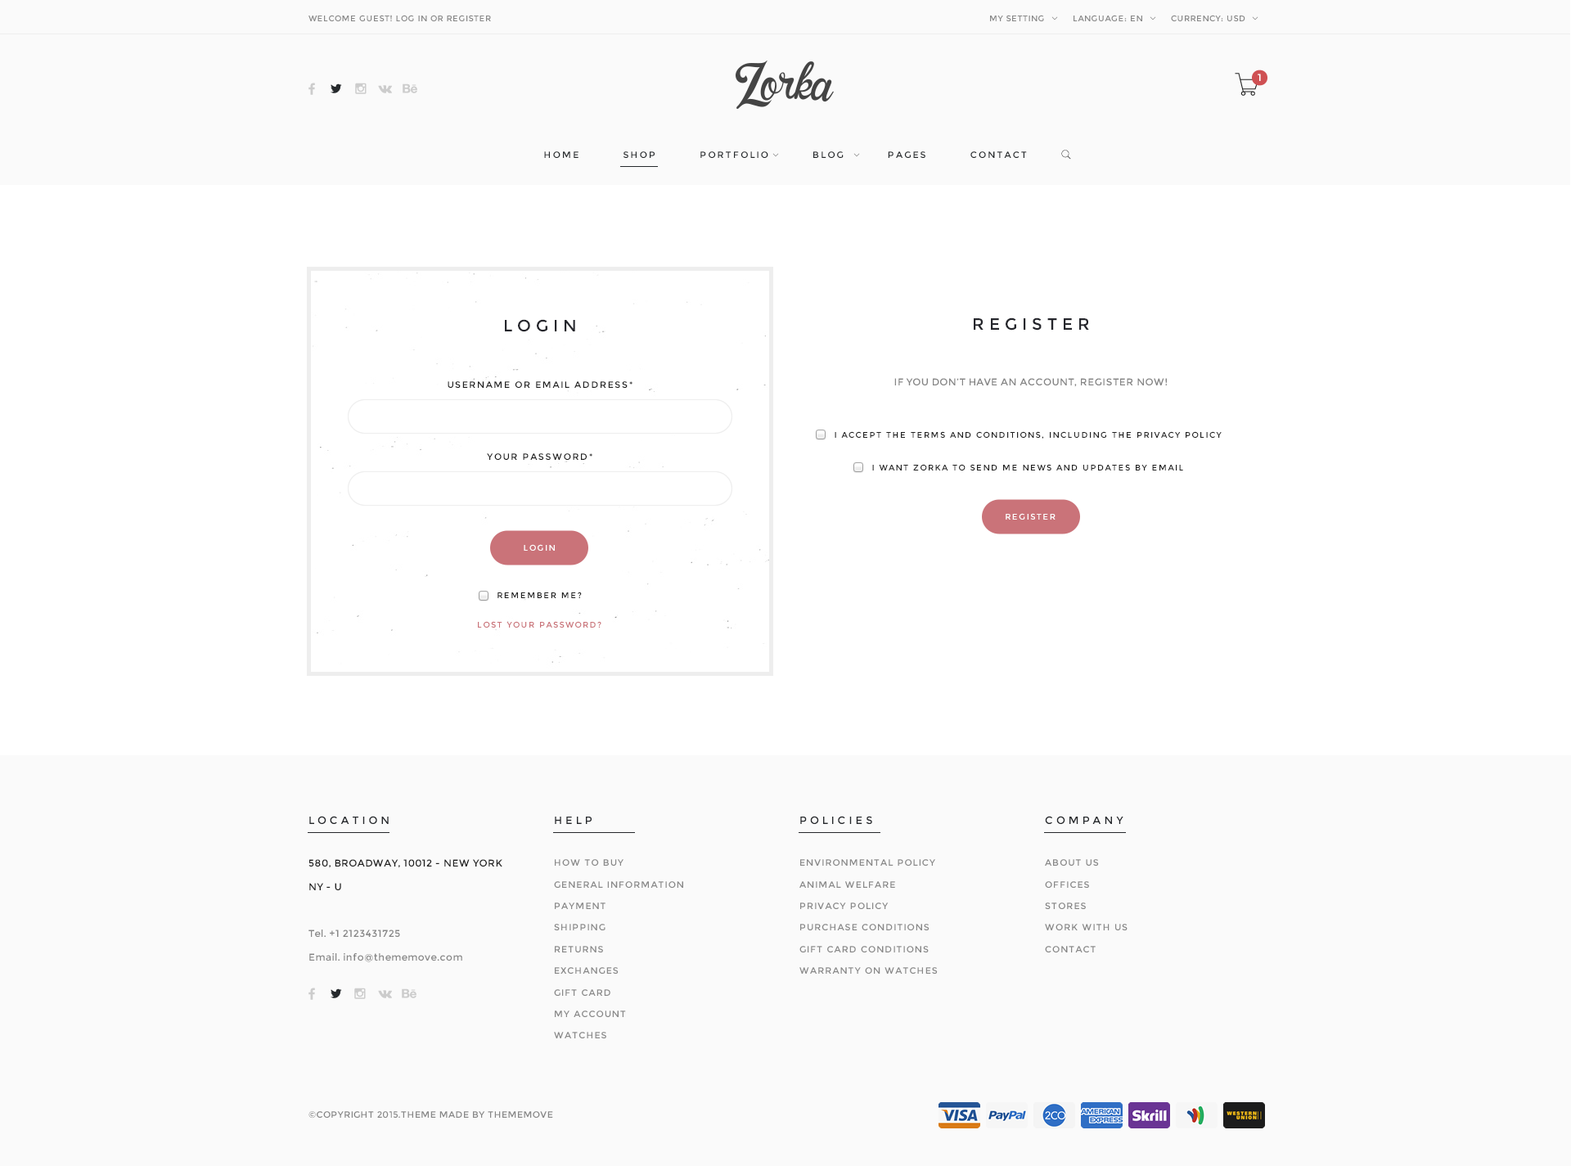
<style>
.page{position:relative;width:1571px;height:1166px;background:#fafafa}
.page>*{position:absolute;margin:0}
.t1{font:8.2px "Montserrat-Regular";letter-spacing:0.05em;color:#888888}
.t2{font:9.8px "Montserrat-Regular";letter-spacing:0.3em;color:#ffffff}
.t3{font:9px "Montserrat-Regular";letter-spacing:0.2em;color:#25292c}
.t4{font:16.4px "Montserrat-Regular";letter-spacing:0.3em;color:#25262c}
.t5{font:9px "Montserrat-Regular";letter-spacing:0.15em;color:#202020}
.t6{font:9.8px "Montserrat-Regular";letter-spacing:0.04em;color:#858585}
.t7{font:8.2px "Montserrat-Regular";letter-spacing:0.15em;color:#212121}
.t8{font:9px "Montserrat-Regular";letter-spacing:0.15em;color:#1f1f1f}
.t9{font:8.2px "Montserrat-Regular";letter-spacing:0.15em;color:#ffffff}
.t10{font:8.2px "Montserrat-Regular";letter-spacing:0.15em;color:#222222}
.t11{font:8.2px "Montserrat-Regular";letter-spacing:0.15em;color:#ca7379}
.t12{font:10.6px "Montserrat-Regular";letter-spacing:0.3em;color:#25282c}
.t13{font:9.8px/23.6px "Montserrat-Regular";letter-spacing:0.04em;color:#868686}
.t14{font:9.8px/23.6px "Montserrat-Regular";letter-spacing:0.04em;color:#202020}
.t15{font:9px/21.6px "Montserrat-Regular";letter-spacing:0.1em;color:#888888}
.t16{font:9px/21.6px "Montserrat-Regular";letter-spacing:0.1em;color:#878787}
.t17{font:9px "Montserrat-Regular";letter-spacing:0.04em;color:#868686}
</style>
<div class="page">
<p class="t1" style="left:308px;top:15px;width:183px;height:6px">WELCOME GUEST! LOG IN OR REGISTER</p>
<p class="t1" style="left:990px;top:15px;width:54px;height:6px">MY SETTING</p>
<p class="t1" style="left:1073px;top:15px;width:69px;height:6px">LANGUAGE: EN</p>
<p class="t1" style="left:1171px;top:15px;width:74px;height:6px">CURRENCY: USD</p>
<p class="t2" style="left:1258px;top:74px;width:3px;height:7px">1</p>
<p class="t3" style="left:544px;top:151px;width:483px;height:7px">HOME          SHOP          PORTFOLIO          BLOG          PAGES          CONTACT</p>
<p class="t4" style="left:974px;top:317px;width:115px;height:14px">REGISTER</p>
<p class="t4" style="left:505px;top:319px;width:70px;height:13px">LOGIN</p>
<p class="t5" style="left:448px;top:381px;width:184px;height:7px">USERNAME OR EMAIL ADDRESS*</p>
<p class="t6" style="left:894px;top:378px;width:274px;height:9px">IF YOU DON’T HAVE AN ACCOUNT, REGISTER NOW!</p>
<p class="t7" style="left:835px;top:431px;width:387px;height:8px">I ACCEPT THE TERMS AND CONDITIONS, INCLUDING THE PRIVACY POLICY</p>
<p class="t8" style="left:487px;top:453px;width:105px;height:7px">YOUR PASSWORD*</p>
<p class="t7" style="left:872px;top:464px;width:311px;height:6px">I WANT ZORKA TO SEND ME NEWS AND UPDATES BY EMAIL</p>
<p class="t9" style="left:1006px;top:513px;width:49px;height:7px">REGISTER</p>
<p class="t9" style="left:524px;top:544px;width:31px;height:7px">LOGIN</p>
<p class="t10" style="left:497px;top:592px;width:85px;height:6px">REMEMBER ME?</p>
<p class="t11" style="left:478px;top:621px;width:123px;height:7px">LOST YOUR PASSWORD?</p>
<p class="t12" style="left:309px;top:816px;width:80px;height:8px">LOCATION</p>
<p class="t12" style="left:555px;top:817px;width:37px;height:7px">HELP</p>
<p class="t12" style="left:800px;top:816px;width:72px;height:8px">POLICIES</p>
<p class="t12" style="left:1045px;top:816px;width:78px;height:8px">COMPANY</p>
<p class="t13" style="left:308px;top:859px;width:194px;height:103px"><span class="t14">580, BROADWAY, 10012 - NEW YORK <br>NY - U<br><br></span>Tel. +1 2123431725<br>Email. info@thememove.com</p>
<p class="t15" style="left:554px;top:859px;width:129px;height:179px">HOW TO BUY<br>GENERAL INFORMATION<br>PAYMENT<br>SHIPPING<br>RETURNS<br>EXCHANGES<br>GIFT CARD<br>MY ACCOUNT<br>WATCHES</p>
<p class="t15" style="left:799px;top:859px;width:139px;height:115px">ENVIRONMENTAL POLICY<br>ANIMAL WELFARE<br>PRIVACY POLICY<br>PURCHASE CONDITIONS<br>GIFT CARD CONDITIONS<br>WARRANTY ON WATCHES</p>
<p class="t16" style="left:1045px;top:859px;width:82px;height:93px">ABOUT US<br>OFFICES<br>STORES<br>WORK WITH US<br>CONTACT</p>
<p class="t17" style="left:308px;top:1111px;width:245px;height:7px">©COPYRIGHT 2015.THEME MADE BY THEMEMOVE</p>
</div>
